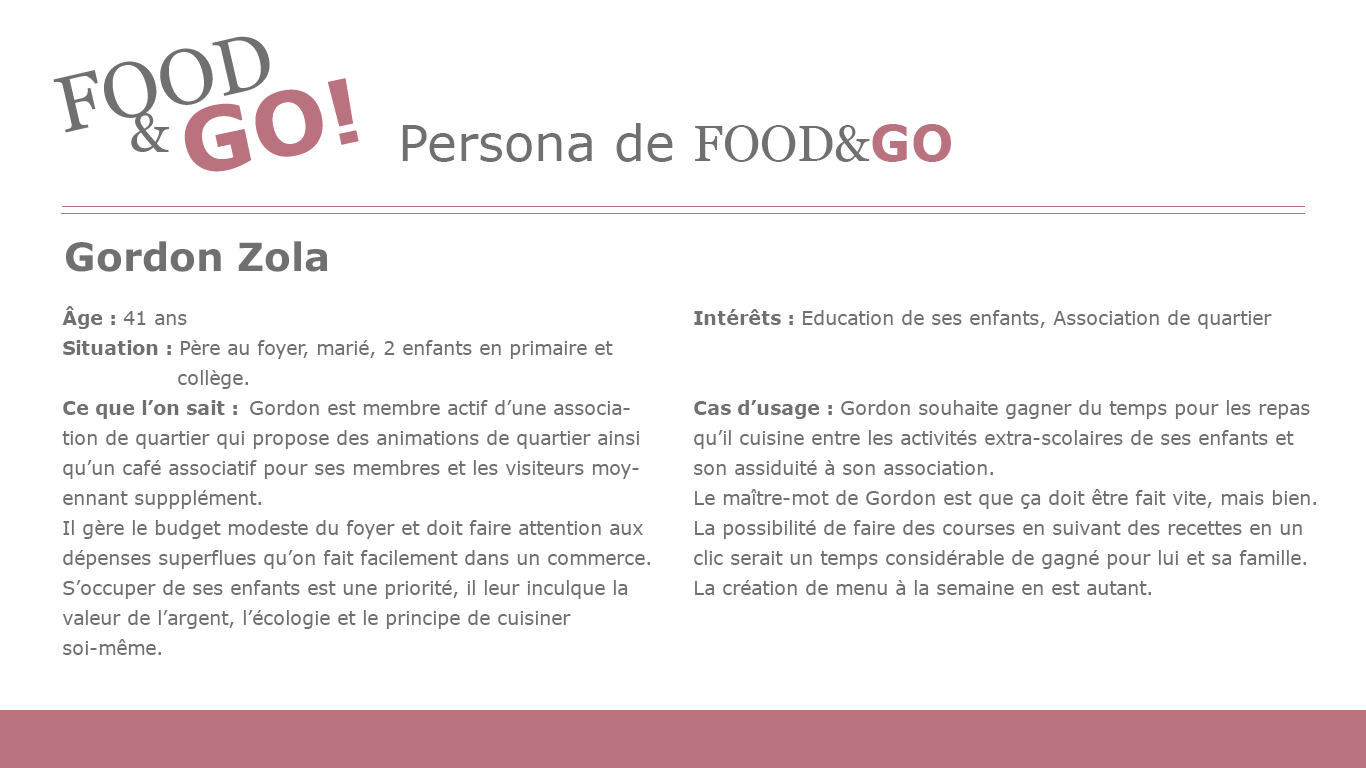
<style>
.page{position:relative;width:1366px;height:768px;background:#ffffff}
.page>*{position:absolute;margin:0}
.t1{font:50px "Verdana";color:#707070}
.t2{font:50px "Georgia";color:#707070}
.t3{font:50px "Verdana-Bold";color:#bb727f}
.t4{font:39px "Verdana-Bold";color:#707070}
.t5{font:19px/30px "Verdana";color:#707070}
.t6{font:19px/30px "Verdana-Bold";color:#707070}
</style>
<div class="page">
<p class="t1" style="left:402px;top:123px;width:549px;height:39px">Persona de <span class="t2">FOOD&amp;</span><span class="t3">GO</span></p>
<p class="t4" style="left:66px;top:241px;width:261px;height:31px">Gordon Zola</p>
<p class="t5" style="left:62px;top:306px;width:588px;height:349px"><span class="t6">Âge : </span>41 ans<br><span class="t6">Situation : </span>Père au foyer, marié, 2 enfants en primaire et        collège.<br><span class="t6">Ce que l’on sait :</span>  Gordon est membre actif d’une association de quartier qui propose des animations de quartier ainsi qu’un café associatif pour ses membres et les visiteurs moyennant suppplément.<br>Il gère le budget modeste du foyer et doit faire attention aux dépenses superflues qu’on fait facilement dans un commerce.<br>S’occuper de ses enfants est une priorité, il leur inculque la valeur de l’argent, l’écologie et le principe de cuisiner soi-même.</p>
<p class="t5" style="left:694px;top:309px;width:622px;height:286px"><span class="t6">Intérêts : </span>Education de ses enfants, Association de quartier<br><span class="t6"><br><br>Cas d’usage : </span>Gordon souhaite gagner du temps pour les repas qu’il cuisine entre les activités extra-scolaires de ses enfants et son assiduité à son association.<br>Le maître-mot de Gordon est que ça doit être fait vite, mais bien.<br>La possibilité de faire des courses en suivant des recettes en un clic serait un temps considérable de gagné pour lui et sa famille.<br>La création de menu à la semaine en est autant.</p>
</div>
